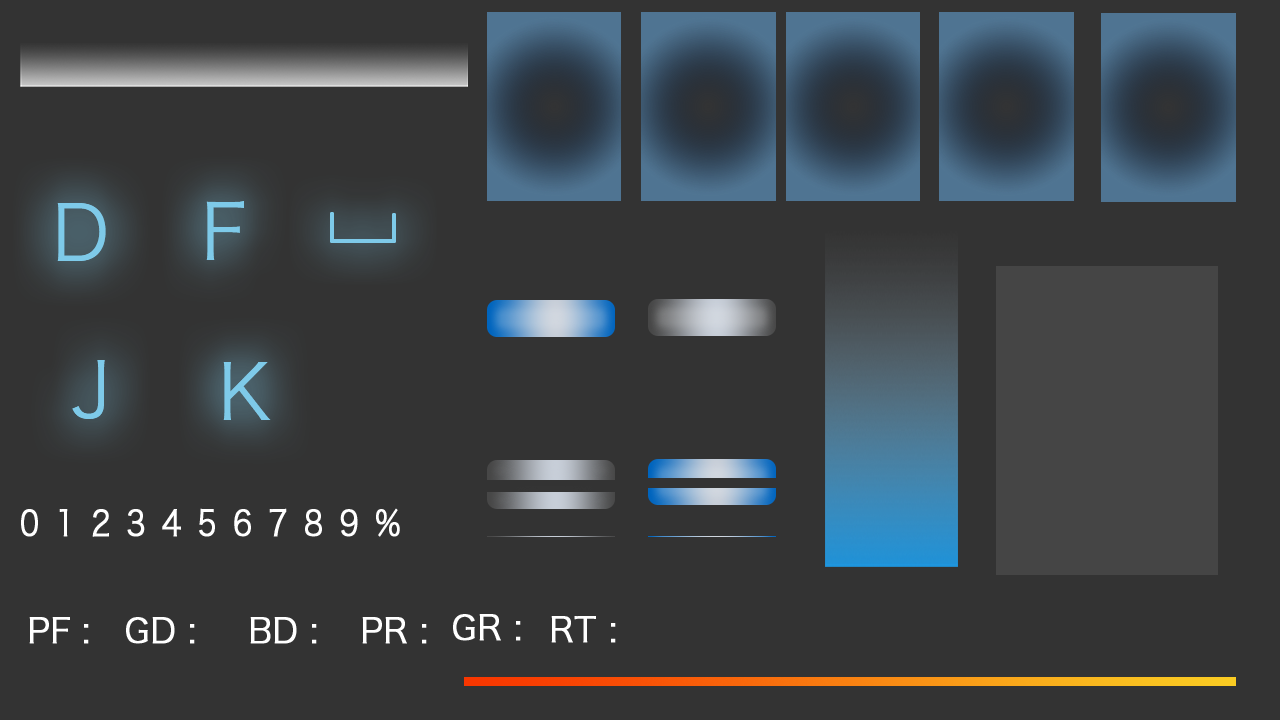
<style>
.page{position:relative;width:1280px;height:720px;background:#333333}
.page>*{position:absolute;margin:0}
.t1{font:75.7px "HiraginoSansGB-W3";letter-spacing:0.23em;color:#7ecae9}
.t2{font:34.7px "HiraginoSansGB-W3";letter-spacing:0.08em;color:#ffffff;font-weight:bold;scale:0.85 1}
.t3{font:33.3px "HiraginoSansGB-W3";color:#ffffff;font-weight:bold}
</style>
<div class="page">
<p class="t1" style="left:57px;top:203px;width:49px;height:58px">D</p>
<p class="t1" style="left:206px;top:201px;width:38px;height:59px">F</p>
<p class="t1" style="left:72px;top:360px;width:33px;height:59px">J</p>
<p class="t1" style="left:223px;top:362px;width:48px;height:58px">K</p>
<p class="t2" style="left:21px;top:508px;width:379px;height:29px">0 1 2 3 4 5 6 7 8 9 %</p>
<p class="t3" style="left:29px;top:617px;width:60px;height:27px">PF :</p>
<p class="t3" style="left:126px;top:617px;width:69px;height:27px">GD :</p>
<p class="t3" style="left:250px;top:617px;width:67px;height:27px">BD :</p>
<p class="t3" style="left:362px;top:617px;width:65px;height:27px">PR :</p>
<p class="t3" style="left:453px;top:614px;width:68px;height:27px">GR :</p>
<p class="t3" style="left:551px;top:616px;width:65px;height:27px">RT :</p>
</div>
